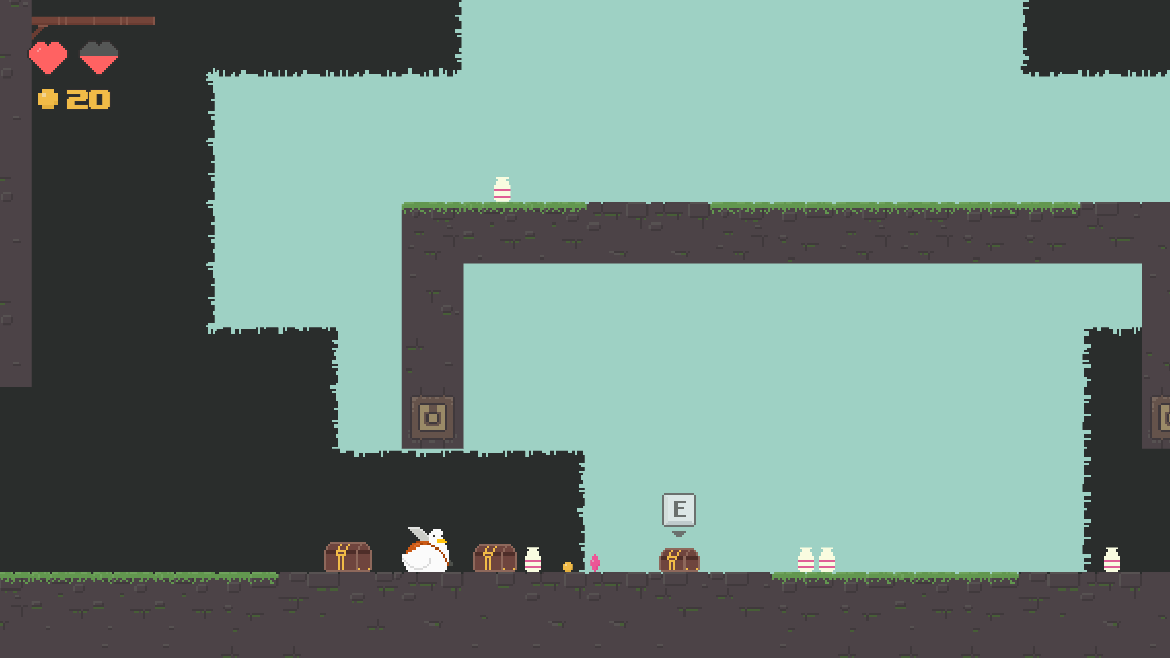
<style>
.page{position:relative;width:1170px;height:658px;background:#9ed1c4}
.page>*{position:absolute;margin:0}
.t1{font:38px "UpheavalTT-BRK-";color:#f1bb47}
</style>
<div class="page">
<p class="t1" style="left:67px;top:90px;width:43px;height:19px">20</p>
</div>
